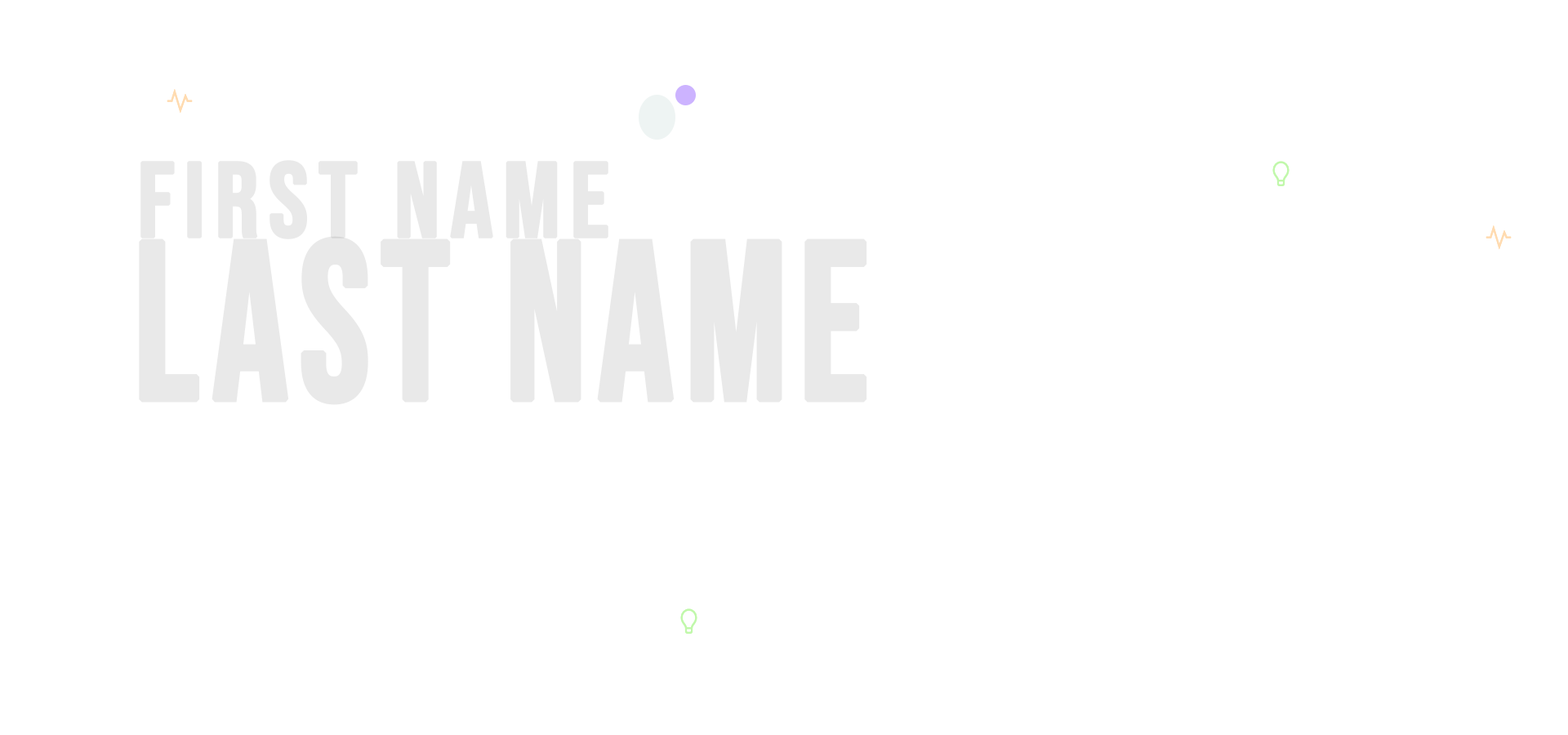
<style>
.page{position:relative;width:1568px;height:735px;background:#ffffff}
.page>*{position:absolute;margin:0}
.t1{font:106.2px "BebasNeue-Regular";letter-spacing:0.07em;color:#e9e9e9;font-weight:bold}
.t2{font:225.4px "BebasNeue-Regular";letter-spacing:0.04em;color:#e9e9e9;font-weight:bold;scale:0.83 1}
</style>
<div class="page">
<p class="t1" style="left:140px;top:160px;width:468px;height:79px">first name</p>
<p class="t2" style="left:139px;top:236px;width:728px;height:169px">LAST NAME</p>
</div>
